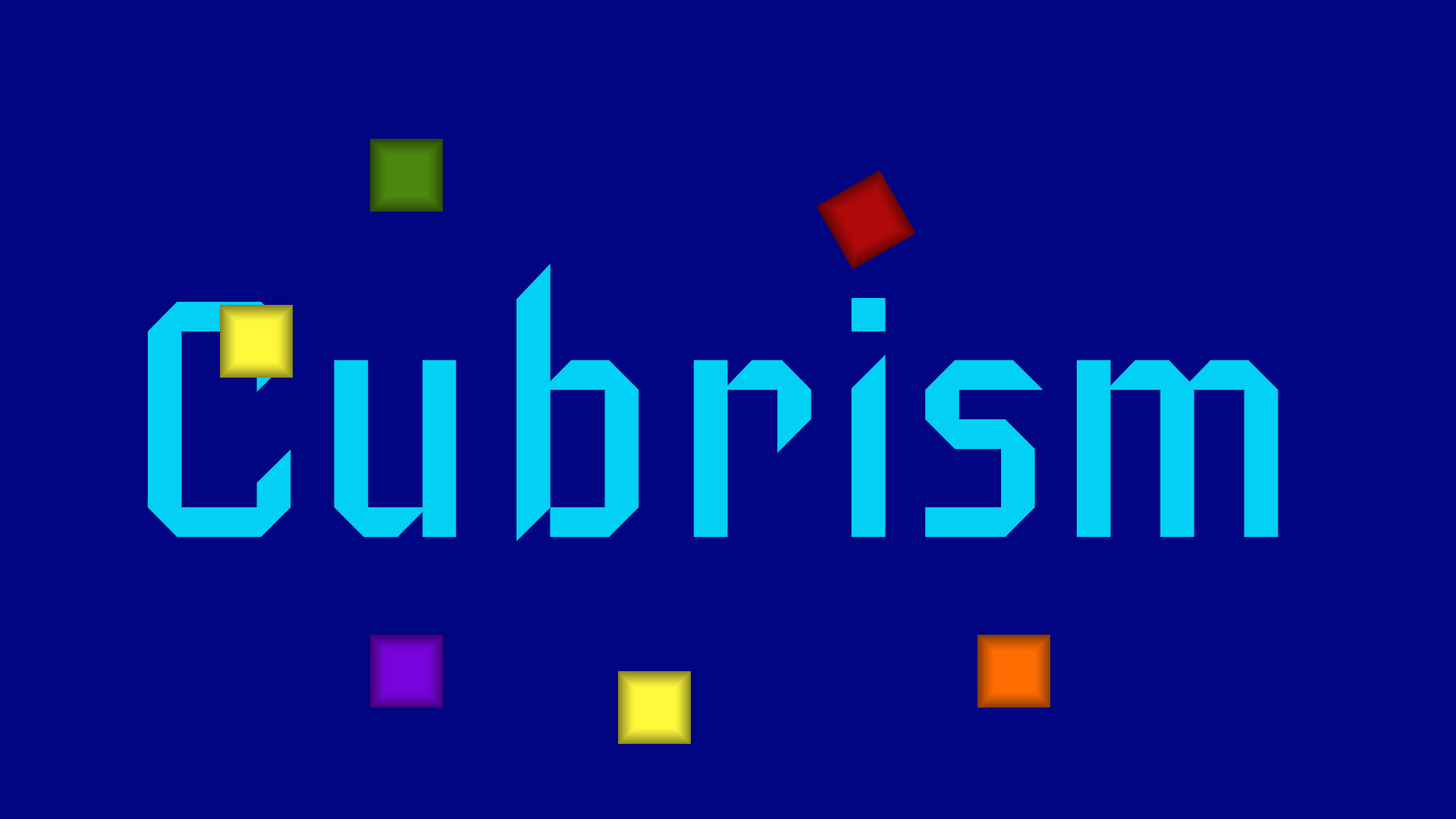
<style>
.page{position:relative;width:1456px;height:819px;background:#020582}
.page>*{position:absolute;margin:0}
.t1{font:339.9px "Iceberg-Regular";color:#03d0f5}
</style>
<div class="page">
<p class="t1" style="left:147px;top:263px;width:1132px;height:278px">Cubrism</p>
</div>
